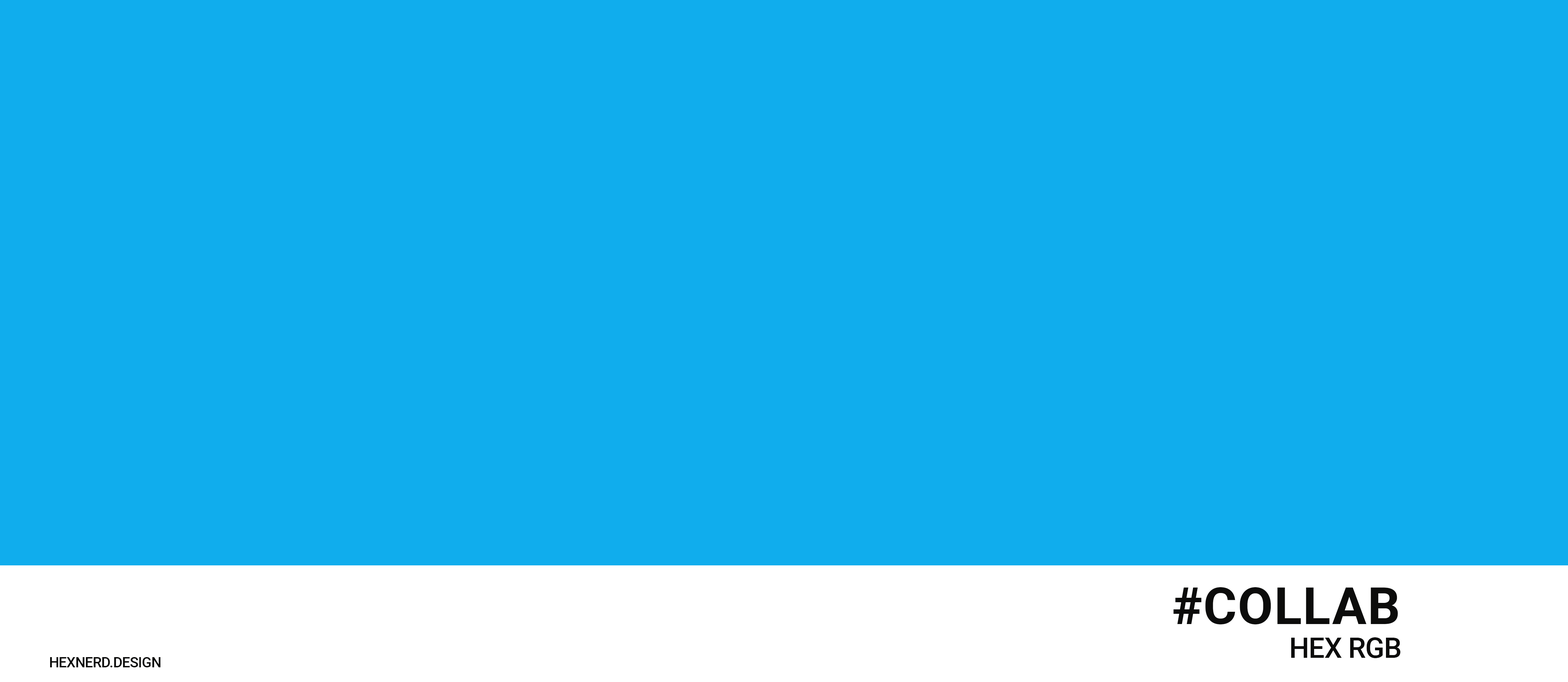
<style>
.page{position:relative;width:1568px;height:682px;background:#10aded}
.page>*{position:absolute;margin:0}
.t1{font:51.2px "Roboto-Bold";letter-spacing:0.02em;color:#0c0c0b}
.t2{font:28.4px "Roboto-Medium";letter-spacing:-0.02em;color:#0c0c0b}
.t3{font:14.2px "Roboto-Medium";letter-spacing:-0.02em;color:#0c0c0b}
</style>
<div class="page">
<p class="t1" style="left:1173px;top:587px;width:225px;height:37px">#COLLAB</p>
<p class="t2" style="left:1291px;top:637px;width:110px;height:21px">HEX RGB</p>
<p class="t3" style="left:50px;top:657px;width:111px;height:10px">HEXNERD.DESIGN</p>
</div>
